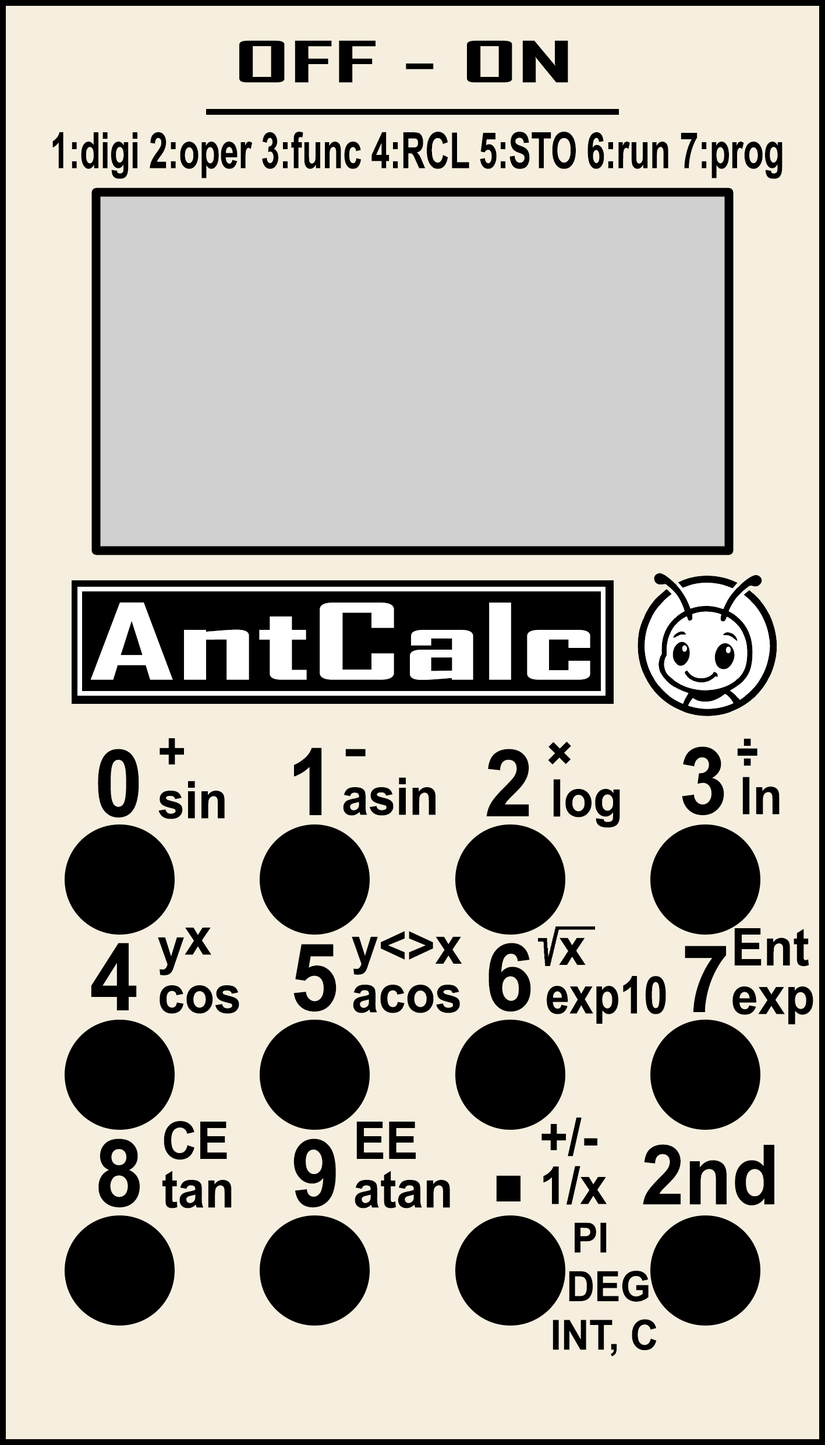
<style>
.page{position:relative;width:825px;height:1445px;background:#f6efdf}
.page>*{position:absolute;margin:0}
.t1{font:54.4px "AgencyFB-Bold";color:#000000;scale:2.15 1}
.t2{font:50px "Arial-BoldMT";color:#000000;scale:0.67 1}
.t3{font:100.7px "AgencyFB-Bold";color:#ffffff;scale:1.96 1}
.t4{font:93.5px "Arial-BoldMT";color:#000000;scale:0.93 1}
.t5{font:51.9px/48.5px "Arial-BoldMT";color:#000000;scale:0.93 1}
.t6{font:51.9px/48.5px "Arial-BoldMT";color:#000000;scale:1.4 1}
.t7{font:51.9px "Arial-BoldMT";color:#000000;scale:0.93 1}
.t8{font:51.9px "Arial-BoldMT";color:#000000;scale:1.4 1}
.t9{font:51.9px/48.5px "Arial-BoldMT";color:#010101;scale:0.93 1}
.t10{font:51.9px/48.5px "Arial-BoldMT";color:#000000;scale:0.83 1}
.t11{font:41.6px/48.5px "Arial-BoldMT";color:#000000;scale:0.93 1}
.t12{font:83.1px "Arial-BoldMT";color:#000000;scale:0.93 1}
.t13{font:187px "Arial-BoldMT";color:#000000;scale:0.93 1}
</style>
<div class="page">
<p class="t1" style="left:239px;top:40px;width:330px;height:43px">OFF - ON</p>
<p class="t2" style="left:52px;top:132px;width:731px;height:47px">1:digi 2:oper 3:func 4:RCL 5:STO 6:run 7:prog</p>
<p class="t3" style="left:91px;top:602px;width:500px;height:78px">AntCalc</p>
<p class="t4" style="left:98px;top:749px;width:41px;height:68px">0</p>
<p class="t5" style="left:158px;top:738px;width:67px;height:81px">+<br>sin</p>
<p class="t4" style="left:294px;top:747px;width:28px;height:68px">1</p>
<p class="t5" style="left:343px;top:749px;width:93px;height:67px"><span class="t6">-<br></span>asin</p>
<p class="t4" style="left:486px;top:749px;width:44px;height:67px">2</p>
<p class="t7" style="left:548px;top:741px;width:23px;height:23px;rotate:45deg">+</p>
<p class="t4" style="left:682px;top:746px;width:43px;height:69px">3</p>
<p class="t8" style="left:737px;top:748px;width:21px;height:8px">-</p>
<p class="t5" style="left:743px;top:738px;width:37px;height:76px">:<br>ln</p>
<p class="t7" style="left:553px;top:779px;width:67px;height:49px">log</p>
<p class="t5" style="left:158px;top:927px;width:81px;height:87px">yx<br>cos</p>
<p class="t5" style="left:733px;top:928px;width:81px;height:96px">Ent<br>exp</p>
<p class="t9" style="left:352px;top:931px;width:111px;height:82px">y&lt;&gt;x<br>acos</p>
<p class="t10" style="left:547px;top:937px;width:119px;height:86px"><span class="t5"> x<br></span>exp10</p>
<p class="t4" style="left:91px;top:943px;width:46px;height:67px">4</p>
<p class="t4" style="left:294px;top:944px;width:43px;height:67px">5</p>
<p class="t4" style="left:489px;top:943px;width:42px;height:68px">6</p>
<p class="t4" style="left:685px;top:945px;width:41px;height:67px">7</p>
<p class="t5" style="left:163px;top:1121px;width:69px;height:87px">CE<br>tan</p>
<p class="t5" style="left:355px;top:1121px;width:95px;height:87px">EE<br>atan</p>
<p class="t11" style="left:542px;top:1117px;width:115px;height:239px"><span class="t5">+/-<br>1/x<br></span>   PI<br>  DEG<br> INT, C</p>
<p class="t4" style="left:98px;top:1138px;width:42px;height:70px">8</p>
<p class="t4" style="left:294px;top:1138px;width:42px;height:70px">9</p>
<p class="t12" style="left:643px;top:1144px;width:132px;height:61px">2nd</p>
<p class="t13" style="left:496px;top:1175px;width:25px;height:26px">.</p>
</div>
